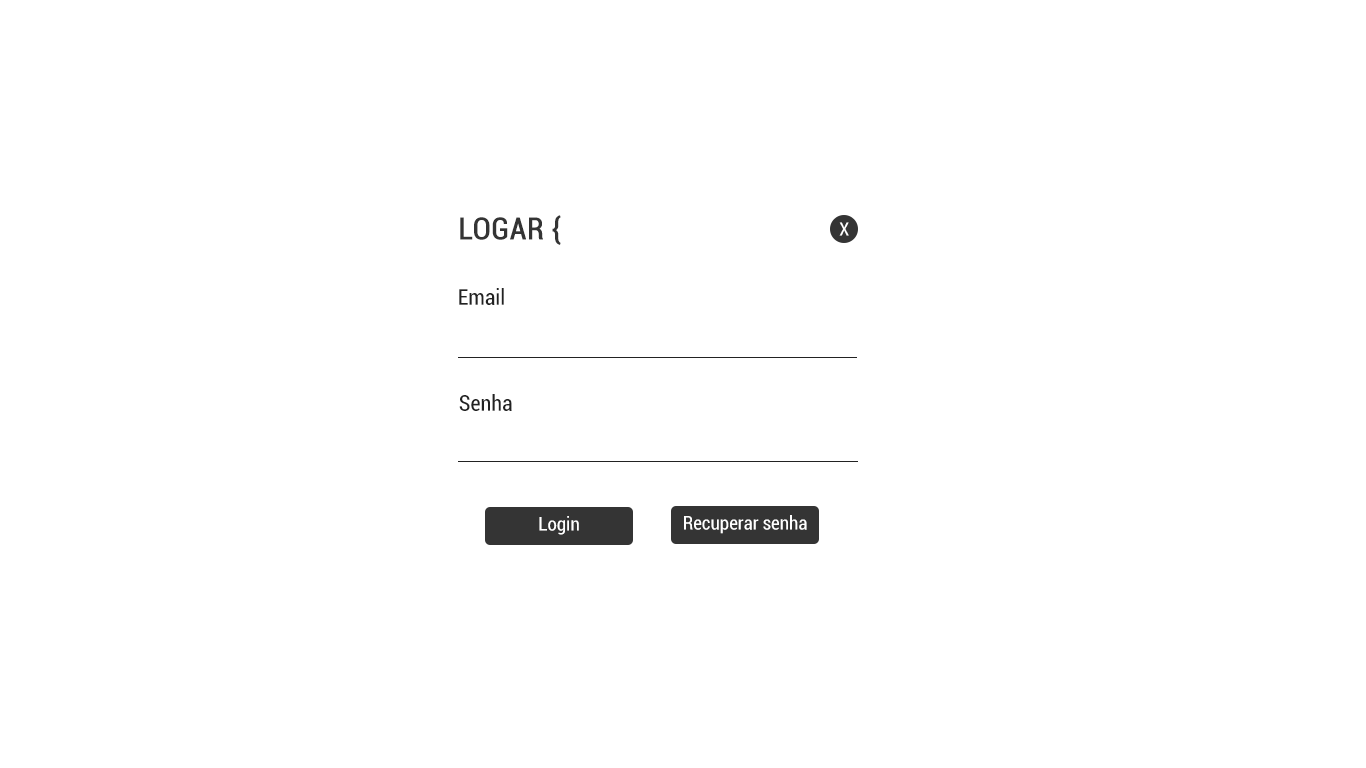
<style>
.page{position:relative;width:1366px;height:768px;background:#ffffff}
.page>*{position:absolute;margin:0}
.t1{font:30px "Roboto-Condensed";color:#343434;font-weight:bold}
.t2{font:18px "Roboto-Condensed";color:#ffffff}
.t3{font:22px "Roboto-Condensed";color:#222222}
.t4{font:19px "Roboto-Condensed";color:#ffffff}
</style>
<div class="page">
<p class="t1" style="left:460px;top:215px;width:101px;height:30px">LOGAR {</p>
<p class="t2" style="left:839px;top:222px;width:10px;height:14px">X</p>
<p class="t3" style="left:459px;top:288px;width:45px;height:17px">Email</p>
<p class="t3" style="left:459px;top:394px;width:53px;height:17px">Senha</p>
<p class="t4" style="left:539px;top:516px;width:40px;height:19px">Login</p>
<p class="t4" style="left:684px;top:515px;width:123px;height:19px">Recuperar senha</p>
</div>
